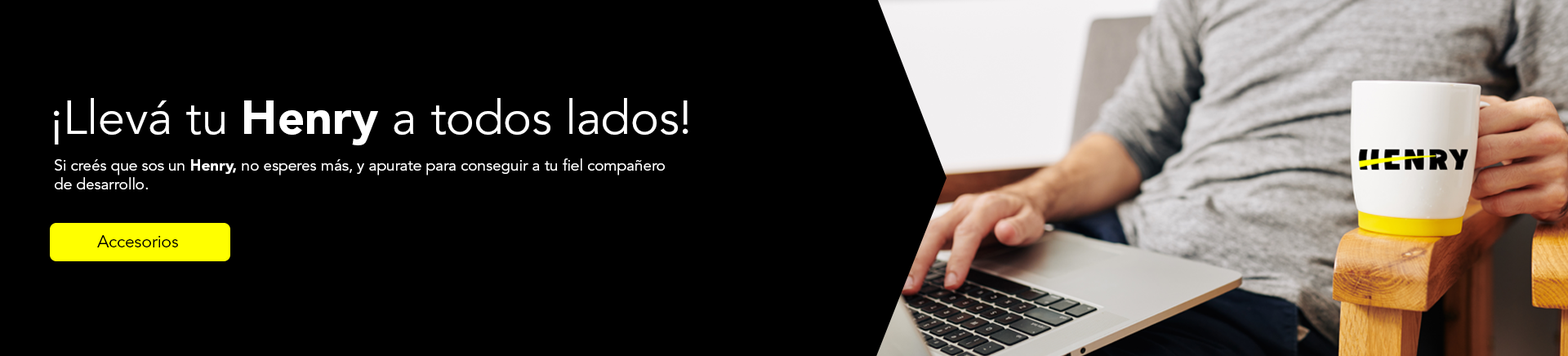
<style>
.page{position:relative;width:1568px;height:356px;background:#000000}
.page>*{position:absolute;margin:0}
.t1{font:47.7px "AvenirLTStd-Book";color:#ffffff}
.t2{font:47.7px "AvenirLTStd-Black";color:#ffffff}
.t3{font:15.4px "AvenirLTStd-Book";color:#ffffff}
.t4{font:15.4px "AvenirLTStd-Black";color:#ffffff}
.t5{font:17px "AvenirLTStd-Book";color:#030300}
</style>
<div class="page">
<p class="t1" style="left:54px;top:98px;width:634px;height:47px">¡Llevá tu <span class="t2">Henry </span>a todos lados!</p>
<p class="t3" style="left:55px;top:158px;width:610px;height:31px">Si creés que sos un <span class="t4">Henry,</span> no esperes más, y apurate para conseguir a tu fiel compañero<br>de desarrollo.</p>
<p class="t5" style="left:97px;top:235px;width:81px;height:12px">Accesorios</p>
</div>
